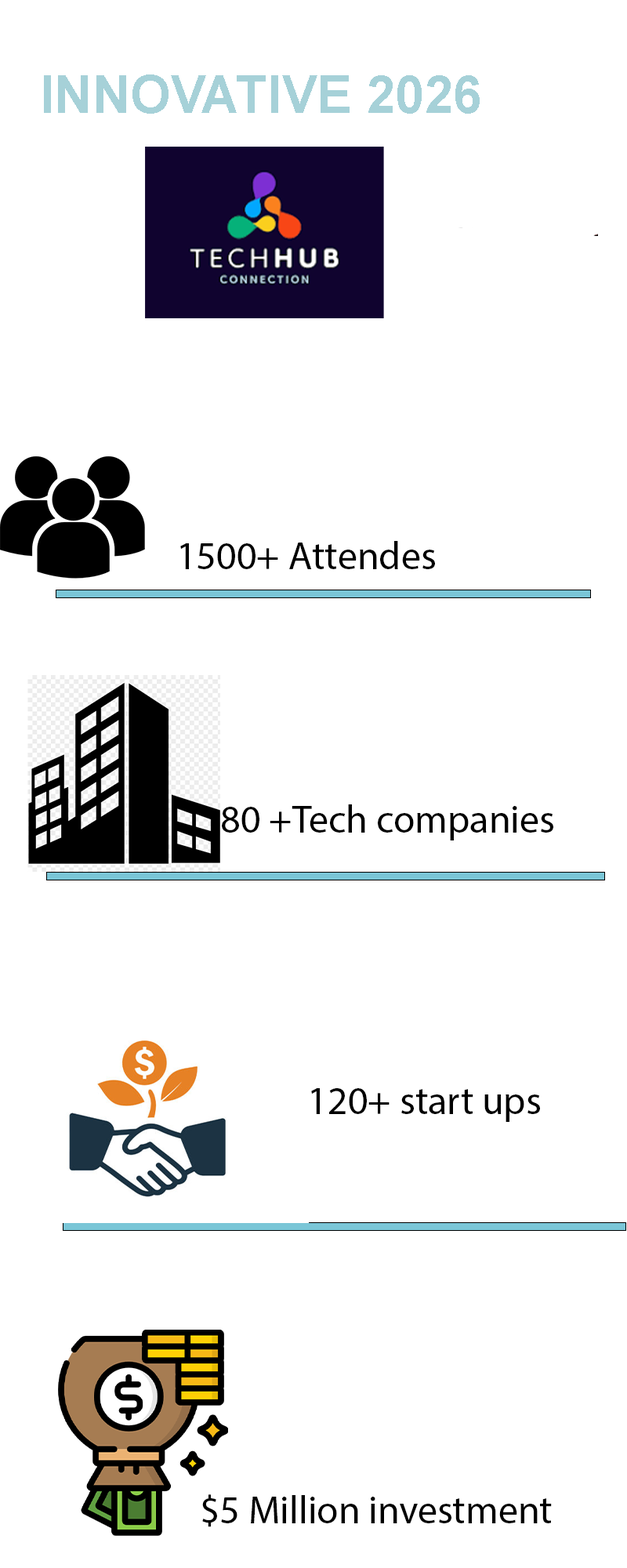
<style>
.page{position:relative;width:627px;height:1568px;background:#ffffff}
.page>*{position:absolute;margin:0}
.t1{font:52.3px "Arial-BoldMT";color:#a6d1d8}
.t2{font:39.2px "MyriadPro-Regular";color:#000000}
</style>
<div class="page">
<p class="t1" style="left:44px;top:74px;width:436px;height:40px">INNOVATIVE 2026</p>
<p class="t2" style="left:180px;top:541px;width:255px;height:28px">1500+ Attendes</p>
<p class="t2" style="left:222px;top:804px;width:332px;height:36px">80 +Tech companies</p>
<p class="t2" style="left:311px;top:1088px;width:229px;height:34px">120+ start ups</p>
<p class="t2" style="left:202px;top:1494px;width:350px;height:33px">$5 Million investment</p>
</div>
